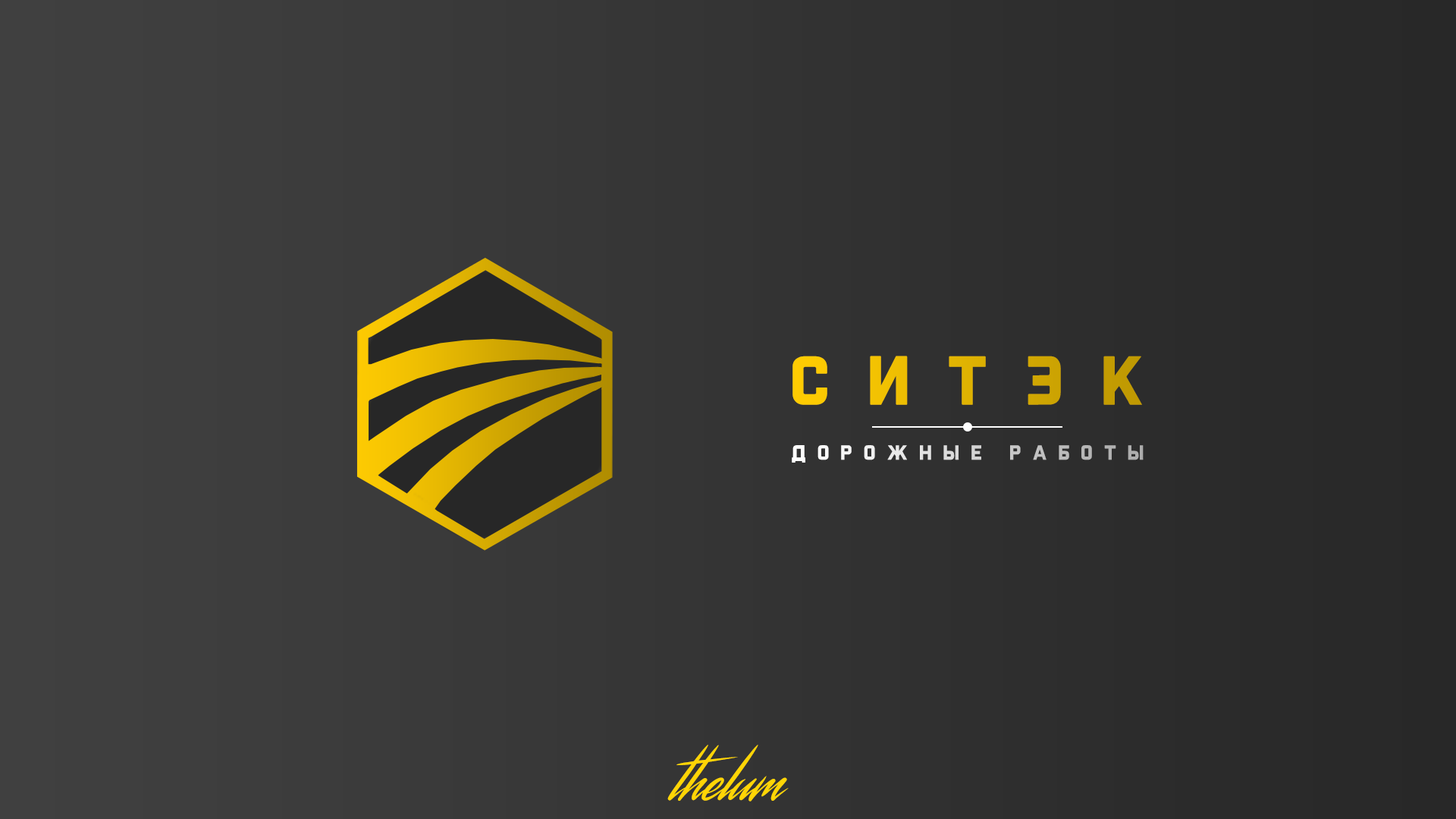
<style>
.page{position:relative;width:1456px;height:819px}
.page>*{position:absolute;margin:0}
.t1{font:72.1px "ReloadAltCyrilicbySTELORQ-Bold";letter-spacing:0.5em}
.t2{font:21.5px "ReloadAltCyrilicbySTELORQ-Bold";letter-spacing:0.5em}
.t3{font:62.2px "StreamsterRUSBYLYAJKA";color:#ffd505}
</style>
<div class="page">
<p class="t1" style="left:792px;top:356px;width:350px;height:49px">Ситэк</p>
<p class="t2" style="left:792px;top:445px;width:352px;height:18px">дорожные работы</p>
<p class="t3" style="left:667px;top:745px;width:122px;height:57px">thelum</p>
</div>
